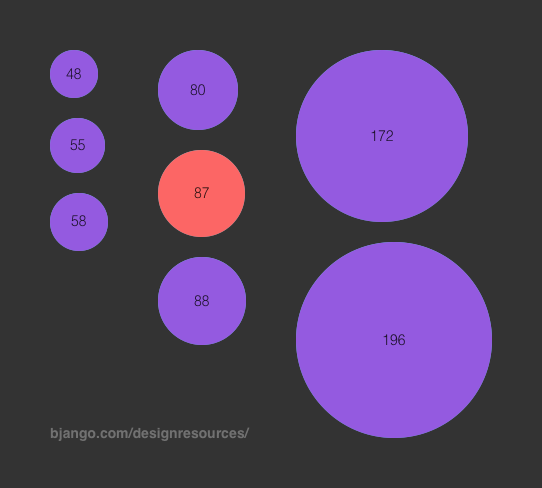
<style>
.page{position:relative;width:542px;height:488px;background:#333333}
.page>*{position:absolute;margin:0}
.t1{font:14px "Helvetica-Light";color:#1e122d}
.t2{font:14px "Helvetica-Light"}
.t3{font:14px "Helvetica-Bold";color:#808080}
</style>
<div class="page">
<p class="t1" style="left:66px;top:68px;width:15px;height:12px">48</p>
<p class="t2" style="left:190px;top:84px;width:15px;height:12px">80</p>
<p class="t1" style="left:371px;top:130px;width:22px;height:11px">172</p>
<p class="t1" style="left:70px;top:139px;width:15px;height:12px">55</p>
<p class="t2" style="left:194px;top:187px;width:15px;height:12px">87</p>
<p class="t1" style="left:71px;top:215px;width:15px;height:12px">58</p>
<p class="t1" style="left:194px;top:295px;width:15px;height:12px">88</p>
<p class="t1" style="left:383px;top:334px;width:22px;height:12px">196</p>
<p class="t3" style="left:50px;top:427px;width:200px;height:14px">bjango.com/designresources/</p>
</div>
